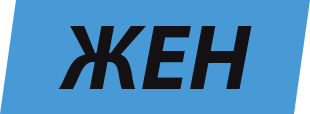
<style>
.page{position:relative;width:310px;height:114px;background:#489ad6}
.page>*{position:absolute;margin:0}
.t1{font:93px "MyriadPro-BoldIt";color:#141114}
</style>
<div class="page">
<p class="t1" style="left:58px;top:26px;width:194px;height:63px">ЖЕН</p>
</div>
